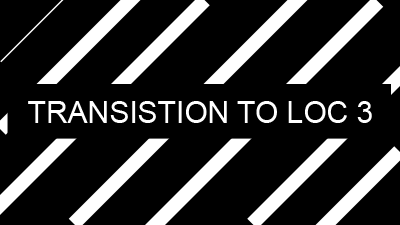
<style>
.page{position:relative;width:400px;height:225px;background:#000000}
.page>*{position:absolute;margin:0}
.t1{font:30px "ArialMT";color:#ffffff}
</style>
<div class="page">
<p class="t1" style="left:28px;top:101px;width:344px;height:22px">TRANSISTION TO LOC 3</p>
</div>
